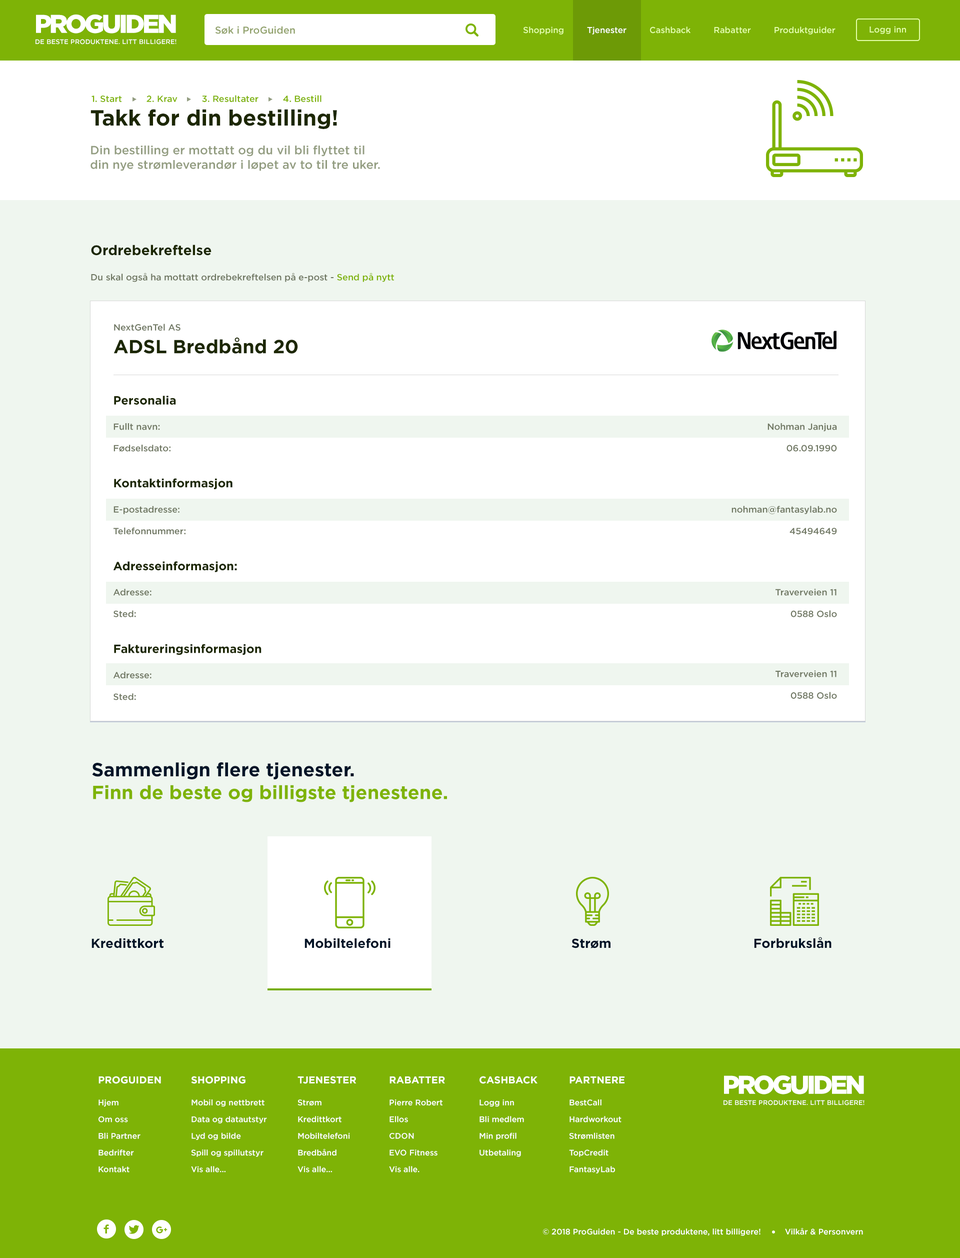
<style>
.page{position:relative;width:960px;height:1258px;background:#eff6ef}
.page>*{position:absolute;margin:0}
.t1{font:6.6px/11.1px "Gotham-Medium";color:#ffffff}
.t2{font:25.7px/42.6px "Gotham-Black";letter-spacing:-0.09em;color:#ffffff}
.t3{font:10px "Gotham-Medium";color:#93a36e}
.t4{font:8.5px "Gotham-Medium";color:#e4feaa}
.t5{font:8.5px "Gotham-Medium";color:#ffffff}
.t6{font:9px "Gotham-Medium";color:#7eb306}
.t7{font:12px "Gotham-Medium";color:#939d81}
.t8{font:22px "Gotham-Bold";color:#1c2702}
.t9{font:9px "Gotham-Medium";color:#6f7762}
.t10{font:14px "Gotham-Bold";color:#1c2702}
.t11{font:19px "Gotham-Bold";color:#1c2702}
.t12{font:12px "Gotham-Bold";color:#1c2702}
.t13{font:19px "Gotham-Bold";color:#7eb306}
.t14{font:19px "Gotham-Bold";color:#021427}
.t15{font:13px "Gotham-Bold";color:#021427}
.t16{font:8px/16.7px "Gotham-Medium";color:#ffffff}
.t17{font:10px/5.2px "Gotham-Bold";color:#ffffff}
.t18{font:8px "Gotham-Medium";color:#ffffff}
</style>
<div class="page">
<p class="t1" style="left:36px;top:14px;width:140px;height:30px;text-align:center"><span class="t2">PROGUIDEN<br></span>DE BESTE PRODUKTENE. LITT BILLIGERE!</p>
<p class="t3" style="left:215px;top:26px;width:80px;height:8px">Søk i ProGuiden</p>
<p class="t4" style="left:523px;top:26px;width:313px;height:8px">Shopping         <span class="t5">Tjenester</span>         Cashback         Rabatter         Produktguider</p>
<p class="t4" style="left:870px;top:26px;width:36px;height:8px">Logg inn</p>
<p class="t6" style="left:92px;top:95px;width:230px;height:7px">1. Start         2. Krav         3. Resultater         4. Bestill</p>
<p class="t7" style="left:90px;top:109px;width:290px;height:62px"><span class="t8">Takk for din bestilling!<br></span><br>Din bestilling er mottatt og du vil bli flyttet til <br>din nye strømleverandør i løpet av to til tre uker.</p>
<p class="t9" style="left:91px;top:244px;width:303px;height:38px"><span class="t10">Ordrebekreftelse<br><br></span>Du skal også ha mottatt ordrebekreftelsen på e-post - <span class="t6">Send på nytt</span></p>
<p class="t11" style="left:114px;top:324px;width:184px;height:30px"><span class="t9">NextGenTel AS<br></span>ADSL Bredbånd 20</p>
<p class="t9" style="left:113px;top:396px;width:149px;height:304px"><span class="t12">Personalia<br><br></span>Fullt navn:<br><br>Fødselsdato:<br><br><br><span class="t12">Kontaktinformasjon<br><br></span>E-postadresse:<br><br>Telefonnummer:<br><br><br><span class="t12">Adresseinformasjon:<br><br></span>Adresse:<br><br>Sted:<br><br><br><span class="t12">Faktureringsinformasjon<br><br></span>Adresse:<br><br>Sted:</p>
<p class="t9" style="left:732px;top:423px;width:105px;height:275px;text-align:right"><span class="t12"><br><br></span>Nohman Janjua<br><br>06.09.1990<br><br><br><br><br>nohman@fantasylab.no<br><br>45494649<br><br><br><br><br>Traverveien 11<br><br>0588 Oslo<br><br><br><br><br><br>Traverveien 11<br><br>0588 Oslo</p>
<p class="t13" style="left:92px;top:762px;width:355px;height:40px"><span class="t14">Sammenlign flere tjenester.<br></span>Finn de beste og billigste tjenestene.</p>
<p class="t15" style="left:92px;top:938px;width:72px;height:10px">Kredittkort</p>
<p class="t15" style="left:304px;top:938px;width:86px;height:10px">Mobiltelefoni</p>
<p class="t15" style="left:572px;top:938px;width:38px;height:10px">Strøm</p>
<p class="t15" style="left:754px;top:936px;width:78px;height:12px">Forbrukslån</p>
<p class="t16" style="left:98px;top:1076px;width:63px;height:96px"><span class="t17">PROGUIDEN<br><br></span>Hjem<br>Om oss<br>Bli Partner<br>Bedrifter<br>Kontakt</p>
<p class="t16" style="left:191px;top:1076px;width:76px;height:96px"><span class="t17">SHOPPING<br><br></span>Mobil og nettbrett<br>Data og datautstyr<br>Lyd og bilde<br>Spill og spillutstyr<br>Vis alle...</p>
<p class="t16" style="left:298px;top:1076px;width:58px;height:96px"><span class="t17">TJENESTER<br><br></span>Strøm<br>Kredittkort<br>Mobiltelefoni<br>Bredbånd <br>Vis alle...</p>
<p class="t16" style="left:389px;top:1076px;width:56px;height:96px"><span class="t17">RABATTER<br><br></span>Pierre Robert<br>Ellos<br>CDON<br>EVO Fitness<br>Vis alle.</p>
<p class="t16" style="left:480px;top:1076px;width:58px;height:80px"><span class="t17">CASHBACK <br><br></span>Logg inn<br>Bli medlem<br>Min profil<br>Utbetaling</p>
<p class="t16" style="left:569px;top:1076px;width:55px;height:97px"><span class="t17">PARTNERE<br><br></span>BestCall<br>Hardworkout<br>Strømlisten<br>TopCredit<br>FantasyLab</p>
<p class="t1" style="left:724px;top:1075px;width:140px;height:30px;text-align:center"><span class="t2">PROGUIDEN<br></span>DE BESTE PRODUKTENE. LITT BILLIGERE!</p>
<p class="t18" style="left:543px;top:1228px;width:320px;height:8px">© 2018 ProGuiden - De beste produktene, litt billigere!          Vilkår &amp; Personvern</p>
</div>
